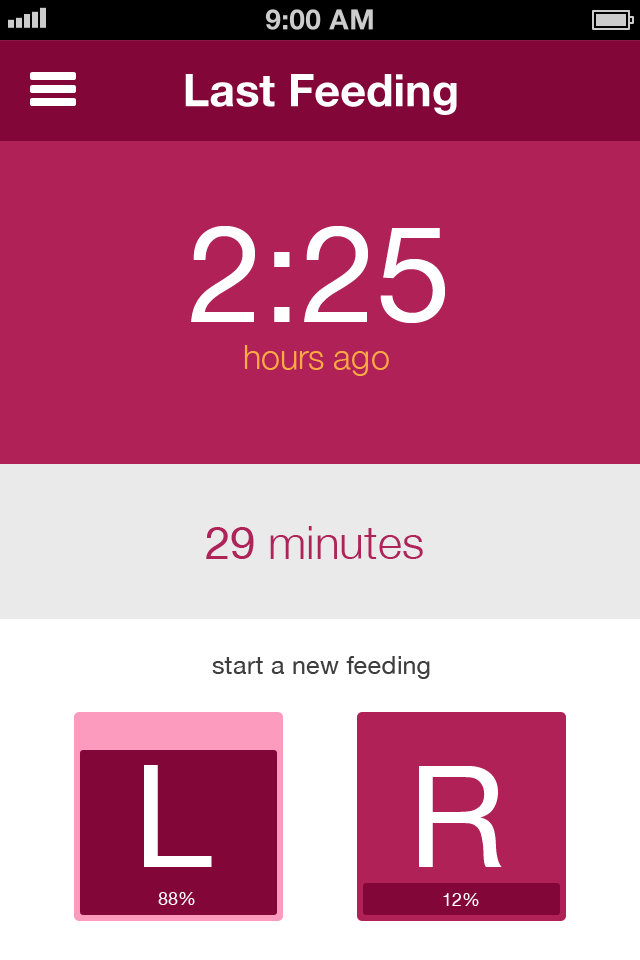
<style>
.page{position:relative;width:640px;height:960px;background:#b02157}
.page>*{position:absolute;margin:0}
.t1{font:45px "HelveticaNeue-Bold";color:#ffffff}
.t2{font:135.5px "HelveticaNeue";color:#ffffff}
.t3{font:34px "HelveticaNeue-Light";color:#fcab43}
.t4{font:46px "HelveticaNeue-Light";color:#ae2458}
.t5{font:46px "HelveticaNeue";color:#ae2458}
.t6{font:25px "HelveticaNeue";color:#3e3e3e}
.t7{font:142.4px "HelveticaNeue";color:#ffffff}
.t8{font:18px "HelveticaNeue";color:#ffffff}
</style>
<div class="page">
<p class="t1" style="left:185px;top:74px;width:272px;height:41px">Last Feeding</p>
<p class="t2" style="left:191px;top:226px;width:254px;height:97px">2:25</p>
<p class="t3" style="left:244px;top:345px;width:145px;height:31px">hours ago</p>
<p class="t4" style="left:206px;top:526px;width:217px;height:33px"><span class="t5">29 </span>minutes</p>
<p class="t6" style="left:212px;top:656px;width:218px;height:23px">start a new feeding</p>
<p class="t7" style="left:144px;top:765px;width:68px;height:102px">L</p>
<p class="t7" style="left:419px;top:766px;width:83px;height:101px">R</p>
<p class="t8" style="left:158px;top:892px;width:37px;height:13px">88%</p>
<p class="t8" style="left:443px;top:893px;width:36px;height:13px">12%</p>
</div>
